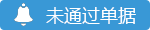
<style>
.page{position:relative;width:150px;height:30px;background:#3998d6}
.page>*{position:absolute;margin:0}
.t1{font:18px "MicrosoftYaHei";color:#ffffff}
</style>
<div class="page">
<p class="t1" style="left:46px;top:7px;width:90px;height:17px">未通过单据</p>
</div>
